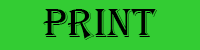
<style>
.page{position:relative;width:200px;height:50px;background:#33cc33}
.page>*{position:absolute;margin:0}
.t1{font:41.7px "Algerian";color:#000000}
</style>
<div class="page">
<p class="t1" style="left:43px;top:9px;width:114px;height:31px">Print</p>
</div>
